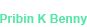
<style>
.page{position:relative;width:87px;height:27px;background:#ffffff}
.page>*{position:absolute;margin:0}
.t1{font:12.2px "Arial-BoldMT";color:#55e6a5}
</style>
<div class="page">
<p class="t1" style="left:0px;top:14px;width:87px;height:11px">Pribin K Benny</p>
</div>
